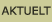
<style>
.page{position:relative;width:52px;height:22px;background:#cccc98}
.page>*{position:absolute;margin:0}
.t1{font:11px "Verdana";color:#2c2c21}
</style>
<div class="page">
<p class="t1" style="left:1px;top:6px;width:50px;height:9px">AKTUELT</p>
</div>
